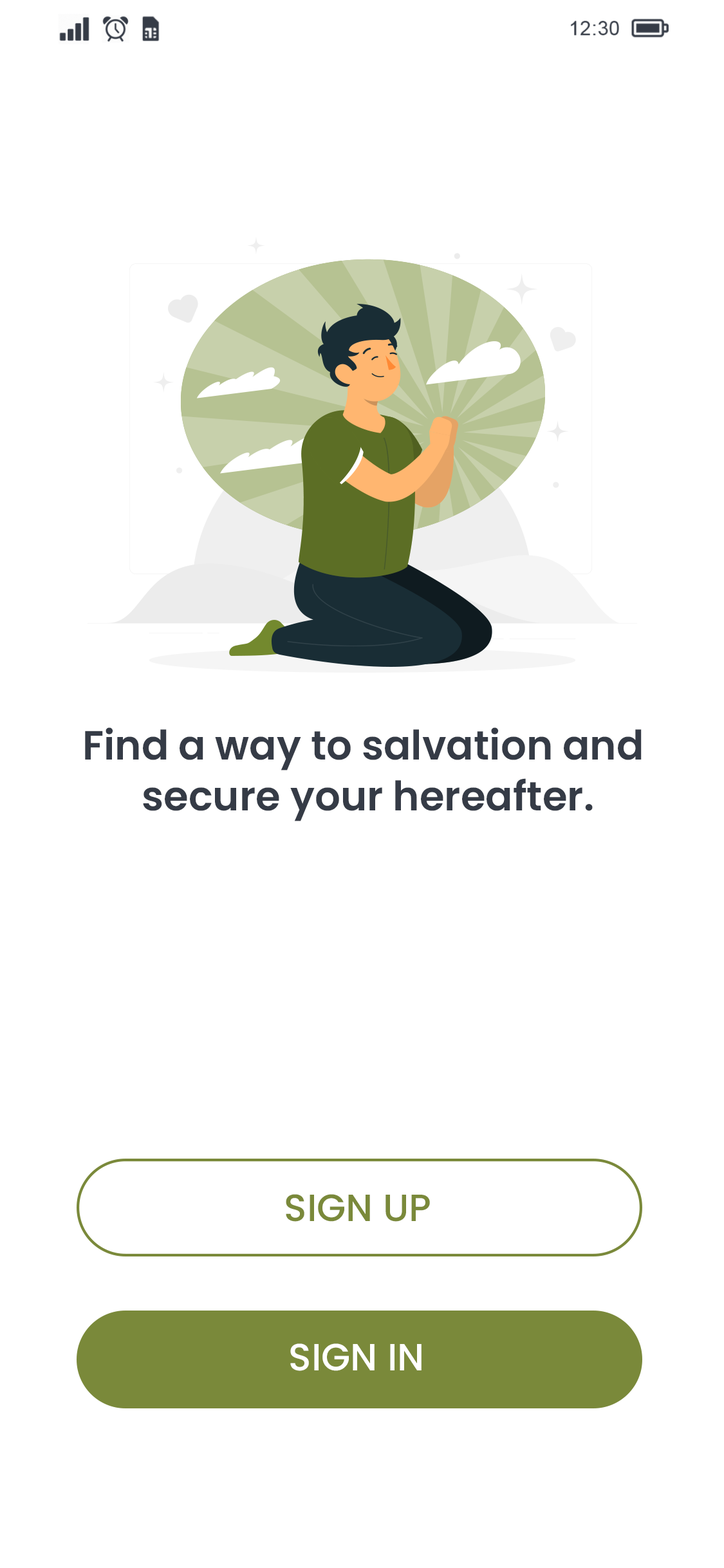
<style>
.page{position:relative;width:724px;height:1568px;background:#ffffff}
.page>*{position:absolute;margin:0}
.t1{font:40.7px/50.9px "Poppins-SemiBold";color:#353b46}
.t2{font:40.7px/50.9px "Poppins-SemiBold";color:#353b46;text-transform:uppercase}
.t3{font:38px "Poppins-Medium";color:#7a893a}
.t4{font:38px "Poppins-Medium";color:#ffffff}
</style>
<div class="page">
<p class="t1" style="left:85px;top:727px;width:557px;height:94px;text-align:center"><span class="t2">F</span>ind a way to salvation and <br>secure your hereafter.</p>
<p class="t3" style="left:286px;top:1194px;width:144px;height:28px">SIGN UP</p>
<p class="t4" style="left:290px;top:1343px;width:132px;height:28px">SIGN IN</p>
</div>
